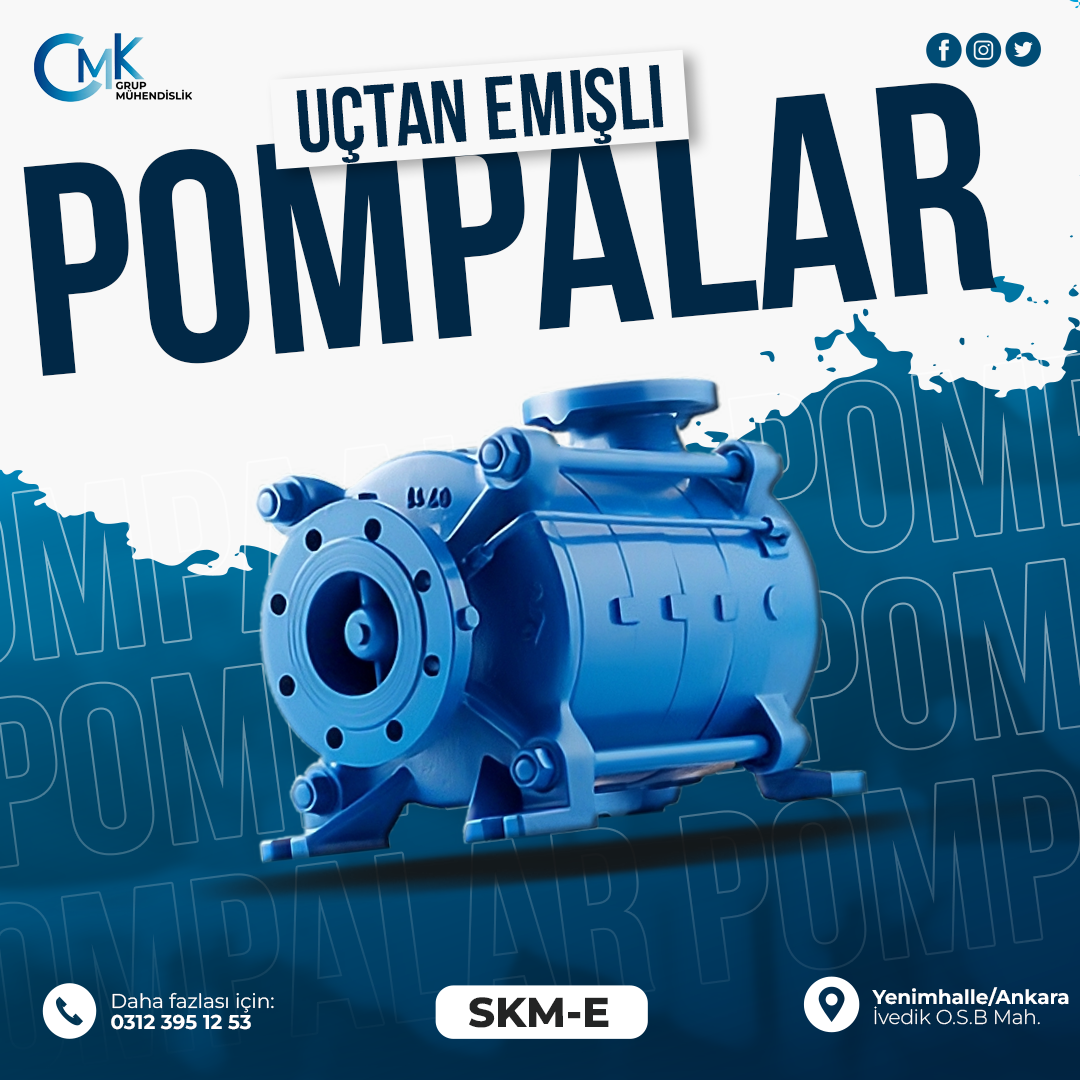
<style>
.page{position:relative;width:1080px;height:1080px;background:#f8f8f8}
.page>*{position:absolute;margin:0}
.t1{font:89.4px "BebasNeueBold";color:#012846;text-transform:uppercase}
.t2{font:299.6px "BebasNeueBold";color:#012846;text-transform:uppercase}
.t3{font:20px/20.3px "Montserrat-Bold";color:#ffffff}
.t4{font:20px/20.3px "Montserrat-Light";color:#ffffff}
.t5{font:19.9px "Montserrat-Regular";color:#ffffff}
.t6{font:41.7px "Montserrat-ExtraBold";color:#232424}
.t7{font:19.9px "Montserrat-Bold";color:#ffffff;text-transform:uppercase}
</style>
<div class="page">
<p class="t1" style="left:296px;top:64px;width:368px;height:99px;rotate:-4deg">uçtan emişli</p>
<p class="t2" style="left:23px;top:83px;width:974px;height:293px;rotate:-5deg">pompalar</p>
<p class="t3" style="left:872px;top:987px;width:197px;height:38px">Yenimhalle/Ankara<br><span class="t4">İvedik O.S.B Mah.</span></p>
<p class="t5" style="left:112px;top:992px;width:162px;height:21px">Daha fazlası için:</p>
<p class="t6" style="left:469px;top:997px;width:140px;height:31px">SKM-E</p>
<p class="t7" style="left:111px;top:1014px;width:140px;height:16px">0312 395 12 53</p>
</div>
